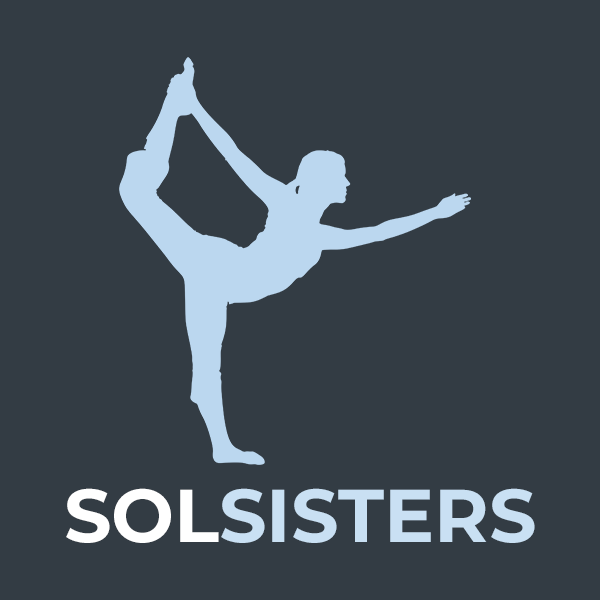
<style>
.page{position:relative;width:600px;height:600px;background:#333c44}
.page>*{position:absolute;margin:0}
.t1{font:74.6px "Montserrat-Bold";color:#bbd7ef;text-transform:uppercase}
.t2{font:74.6px "Montserrat-Bold";color:#ffffff;text-transform:uppercase}
</style>
<div class="page">
<p class="t1" style="left:66px;top:488px;width:469px;height:55px"><span class="t2">Sol</span>Sisters</p>
</div>
